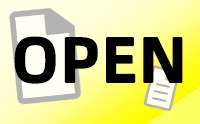
<style>
.page{position:relative;width:200px;height:124px}
.page>*{position:absolute;margin:0}
.t1{font:63.5px "AlibabaPuHuiTiM";color:#010000;font-weight:bold}
</style>
<div class="page">
<p class="t1" style="left:14px;top:36px;width:169px;height:48px">OPEN</p>
</div>
